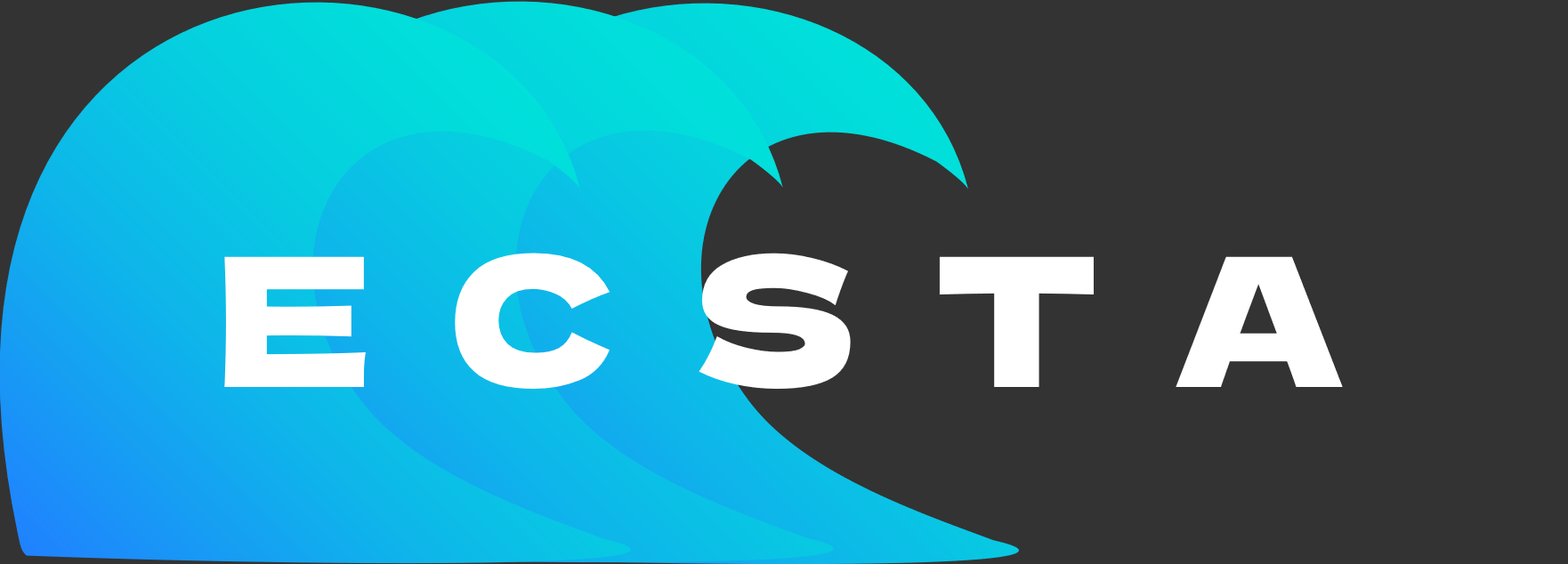
<style>
.page{position:relative;width:1568px;height:564px;background:#333333}
.page>*{position:absolute;margin:0}
.t1{font:179.3px "DelaGothicOne-Regular";letter-spacing:0.109em;color:#ffffff}
</style>
<div class="page">
<p class="t1" style="left:224px;top:253px;width:1119px;height:137px">E C S T A</p>
</div>
